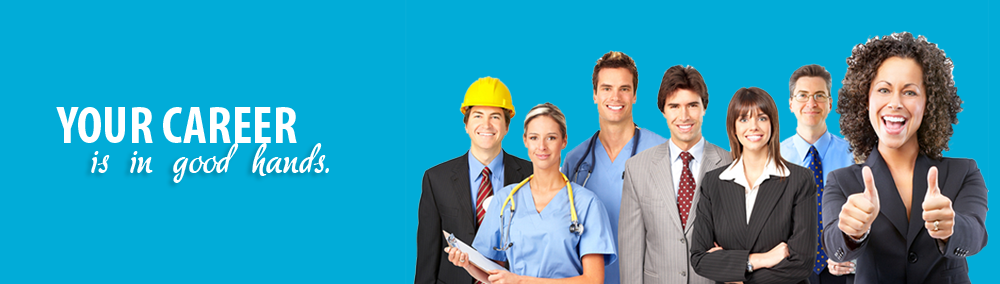
<style>
.page{position:relative;width:1000px;height:284px;background:#01acd8}
.page>*{position:absolute;margin:0}
.t1{font:52.4px "MyriadPro-BoldCond";color:#ffffff;text-transform:uppercase}
.t2{font:40.4px "akaDora";color:#ffffff}
</style>
<div class="page">
<p class="t1" style="left:56px;top:107px;width:241px;height:36px">YOUr CAREER</p>
<p class="t2" style="left:91px;top:143px;width:238px;height:40px">is in good hands.</p>
</div>
